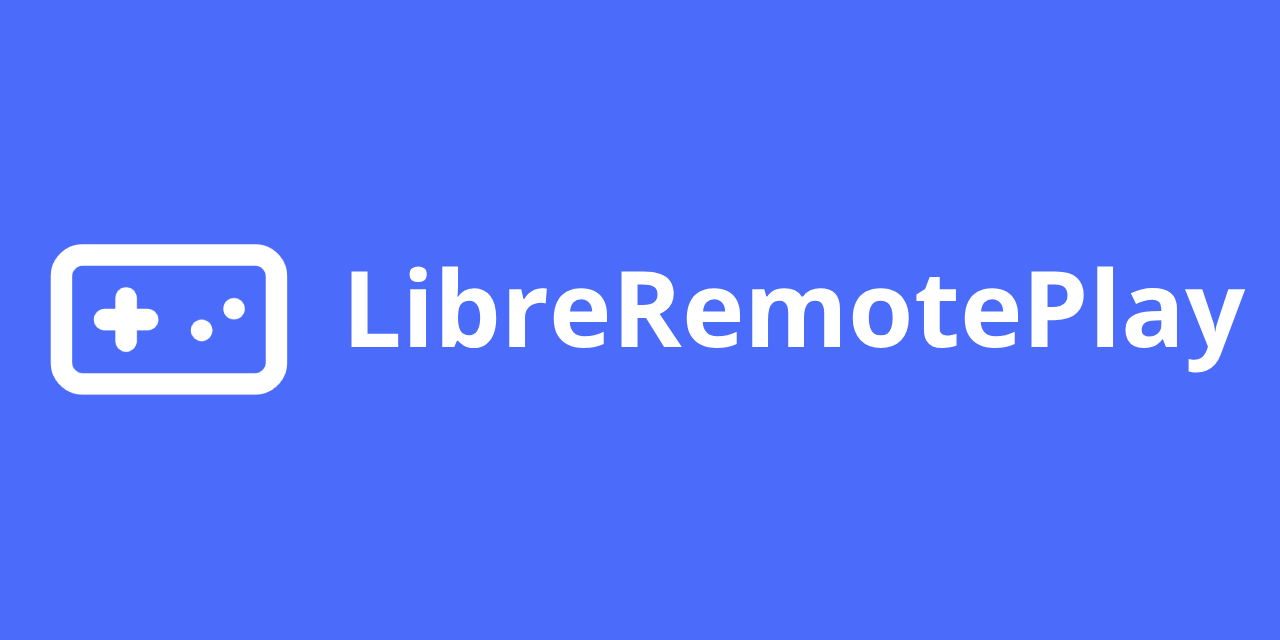
<style>
.page{position:relative;width:1280px;height:640px;background:#4b6bfb}
.page>*{position:absolute;margin:0}
.t1{font:105.8px "OpenSans-Bold";color:#ffffff}
</style>
<div class="page">
<p class="t1" style="left:351px;top:266px;width:895px;height:107px">LibreRemotePlay</p>
</div>
